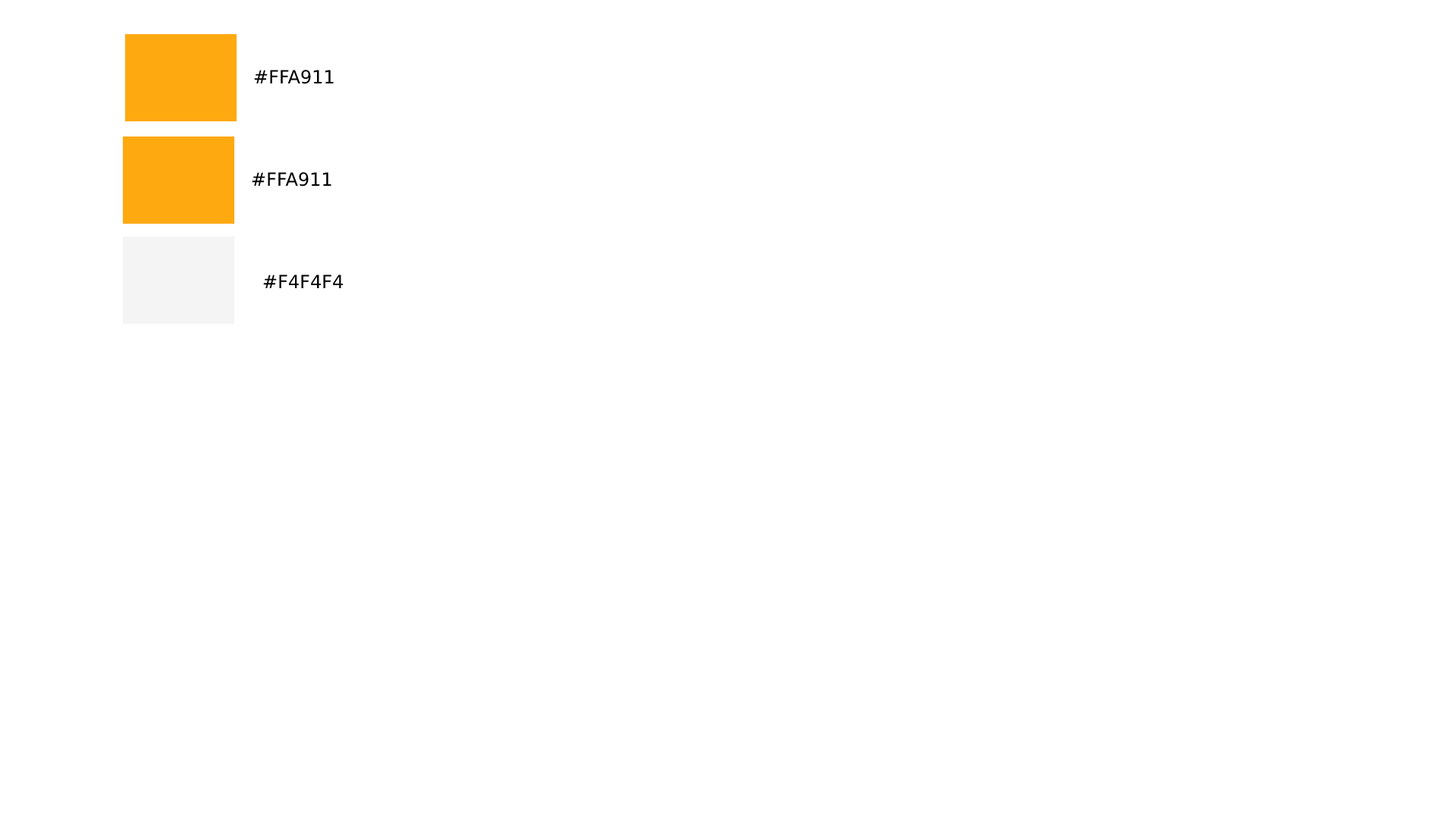
<style>
.page{position:relative;width:1456px;height:819px;background:#ffffff}
.page>*{position:absolute;margin:0}
.t1{font:18.2px "DejaVuSans";color:#000000}
</style>
<div class="page">
<p class="t1" style="left:254px;top:70px;width:80px;height:14px">#FFA911</p>
<p class="t1" style="left:252px;top:172px;width:79px;height:15px">#FFA911</p>
<p class="t1" style="left:263px;top:275px;width:80px;height:13px">#F4F4F4</p>
</div>
